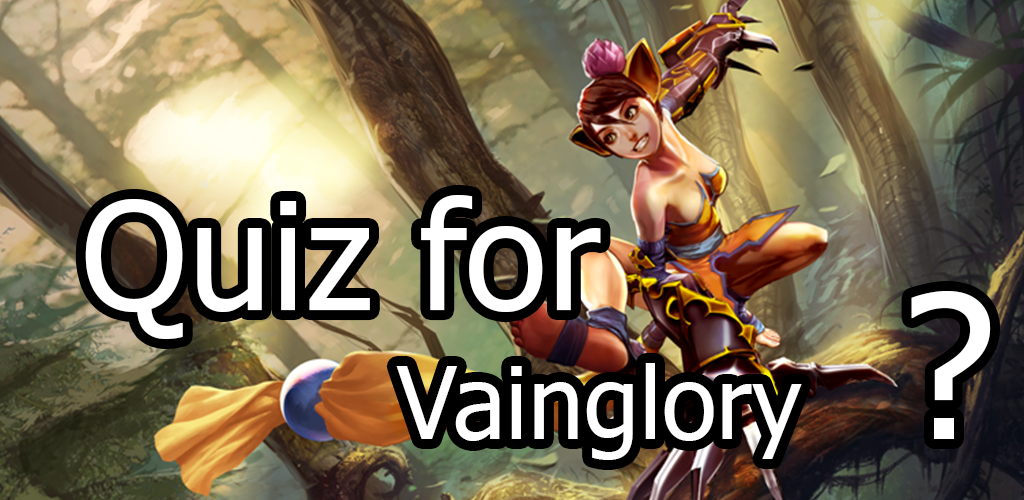
<style>
.page{position:relative;width:1024px;height:500px}
.page>*{position:absolute;margin:0}
.t1{font:150px "Tahoma";color:#ffffff}
.t2{font:200px "Tahoma";color:#ffffff}
.t3{font:100px "Tahoma";color:#ffffff}
</style>
<div class="page">
<p class="t1" style="left:85px;top:195px;width:516px;height:144px">Quiz for</p>
<p class="t2" style="left:911px;top:291px;width:80px;height:148px">?</p>
<p class="t3" style="left:396px;top:363px;width:406px;height:97px">Vainglory</p>
</div>
